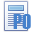
<style>
.page{position:relative;width:32px;height:32px}
.page>*{position:absolute;margin:0}
.t1{font:21.3px "Haettenschweiler";color:#4682cc;scale:1.1 1}
</style>
<div class="page">
<p class="t1" style="left:13px;top:14px;width:18px;height:15px">PO</p>
</div>
